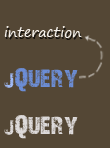
<style>
.page{position:relative;width:110px;height:148px;background:#544735}
.page>*{position:absolute;margin:0}
.t1{font:14px "SegoePrint";color:#f4f0ea}
.t2{font:26px "28DaysLater";color:#6c8dd5}
.t3{font:22px "28DaysLater";color:#a0bbf8}
.t4{font:26px "28DaysLater";color:#dddada}
.t5{font:22px "28DaysLater";color:#dddada}
</style>
<div class="page">
<p class="t1" style="left:4px;top:26px;width:78px;height:12px">interaction</p>
<p class="t2" style="left:4px;top:68px;width:74px;height:24px"><span class="t3">j</span>Query</p>
<p class="t4" style="left:4px;top:115px;width:74px;height:24px"><span class="t5">j</span>Query</p>
</div>
